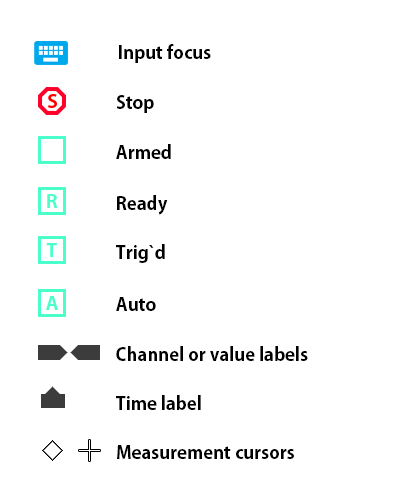
<style>
.page{position:relative;width:393px;height:499px;background:#ffffff}
.page>*{position:absolute;margin:0}
.t1{font:18px "AdobeGothicStd-Bold";color:#000000}
</style>
<div class="page">
<p class="t1" style="left:119px;top:44px;width:92px;height:19px">Input focus</p>
<p class="t1" style="left:116px;top:95px;width:38px;height:18px">Stop</p>
<p class="t1" style="left:116px;top:144px;width:55px;height:15px">Armed</p>
<p class="t1" style="left:117px;top:195px;width:51px;height:20px">Ready</p>
<p class="t1" style="left:116px;top:244px;width:49px;height:19px">Trig`d</p>
<p class="t1" style="left:116px;top:297px;width:40px;height:14px">Auto</p>
<p class="t1" style="left:116px;top:346px;width:192px;height:15px">Channel or value labels</p>
<p class="t1" style="left:116px;top:395px;width:85px;height:15px">Time label</p>
<p class="t1" style="left:117px;top:445px;width:177px;height:14px">Measurement cursors</p>
</div>
